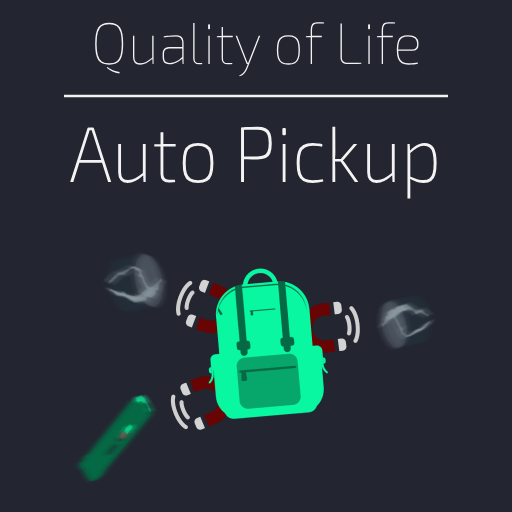
<style>
.page{position:relative;width:512px;height:512px;background:#232530}
.page>*{position:absolute;margin:0}
.t1{font:58.6px "Exo2-Thin";color:#f3f3f3;scale:0.94 1}
.t2{font:79px "Exo2-ExtraLight";color:#f3f3f3;scale:0.9 1}
</style>
<div class="page">
<p class="t1" style="left:95px;top:22px;width:324px;height:55px">Quality of Life</p>
<p class="t2" style="left:70px;top:126px;width:367px;height:73px">Auto Pickup</p>
</div>
